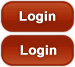
<style>
.page{position:relative;width:75px;height:67px;background:#932106}
.page>*{position:absolute;margin:0}
.t1{font:13px "Arial-BoldMT";color:#ffffff;font-weight:bold}
</style>
<div class="page">
<p class="t1" style="left:19px;top:11px;width:37px;height:13px">Login</p>
<p class="t1" style="left:20px;top:45px;width:37px;height:13px">Login</p>
</div>
